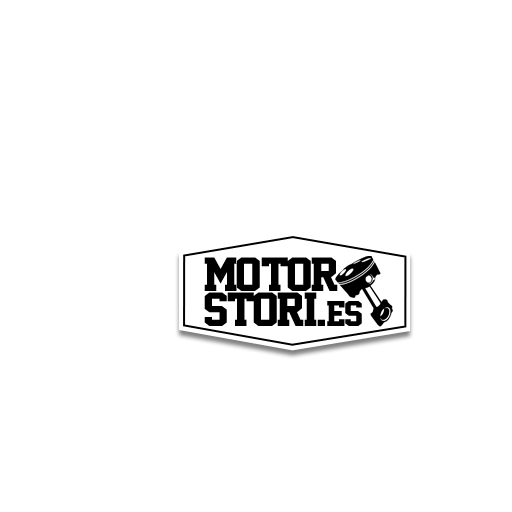
<style>
.page{position:relative;width:512px;height:512px;background:#ffffff}
.page>*{position:absolute;margin:0}
.t1{font:43.7px "SuperstarM54";letter-spacing:-0.05em;color:#000000;scale:1.18 1}
.t2{font:43.7px "SuperstarM54";letter-spacing:-0.025em;color:#000000;scale:1.18 1}
.t3{font:32.8px "SuperstarM54";letter-spacing:-0.05em;color:#000000;scale:1.18 1}
</style>
<div class="page">
<p class="t1" style="left:204px;top:257px;width:134px;height:34px">MOTOR</p>
<p class="t1" style="left:204px;top:292px;width:158px;height:34px">STOR<span class="t2">I.</span><span class="t3">ES</span></p>
</div>
